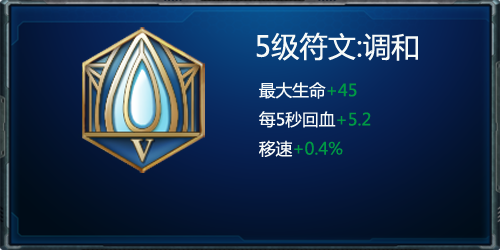
<style>
.page{position:relative;width:500px;height:250px}
.page>*{position:absolute;margin:0}
.t1{font:28.3px "MicrosoftYaHei";color:#f7faf8}
.t2{font:16.7px "MicrosoftYaHei";color:#f7faf8}
.t3{font:16.7px "MicrosoftYaHei";color:#009944}
</style>
<div class="page">
<p class="t1" style="left:256px;top:32px;width:162px;height:125px;text-align:center">5级符文:调和<br><span class="t2">  最大生命</span><span class="t3">+45<br></span><span class="t2">  每5秒回血</span><span class="t3">+5.2<br></span><span class="t2">  移速</span><span class="t3">+0.4%</span></p>
</div>
